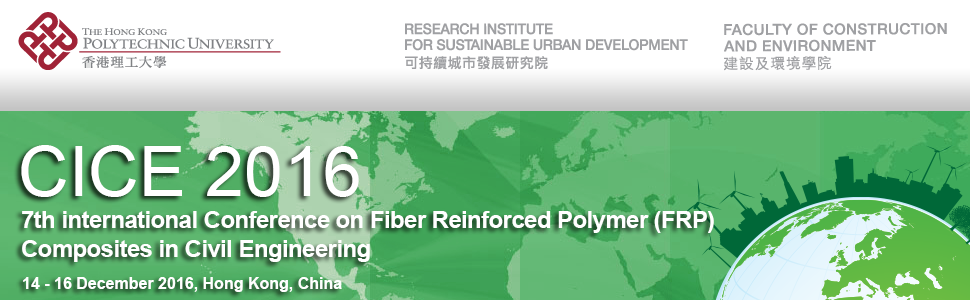
<style>
.page{position:relative;width:970px;height:300px;background:#ffffff}
.page>*{position:absolute;margin:0}
.t1{font:70px "ArialMT";color:#ffffff}
.t2{font:24px "Arial-BoldMT";letter-spacing:-0.025em;color:#ffffff}
.t3{font:16px "Arial-BoldMT";color:#ffffff}
</style>
<div class="page">
<p class="t1" style="left:21px;top:145px;width:338px;height:52px">CICE 2016</p>
<p class="t2" style="left:22px;top:211px;width:692px;height:51px">7th international Conference on Fiber Reinforced Polymer (FRP)<br>Composites in Civil Engineering</p>
<p class="t3" style="left:23px;top:277px;width:319px;height:15px">14 - 16 December 2016, Hong Kong, China</p>
</div>
